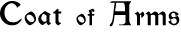
<style>
.page{position:relative;width:181px;height:32px;background:#ffffff}
.page>*{position:absolute;margin:0}
.t1{font:24px "Kelmscott-Regular";letter-spacing:0.05em;color:#000000}
.t2{font:30px "Kelmscott-Regular";letter-spacing:0.05em;color:#000000}
.t3{font:20px "Kelmscott-Regular";letter-spacing:0.05em;color:#000000}
</style>
<div class="page">
<p class="t1" style="left:0px;top:1px;width:180px;height:26px"><span class="t2">C</span>oat <span class="t3">of </span><span class="t2">A</span>rms</p>
</div>
